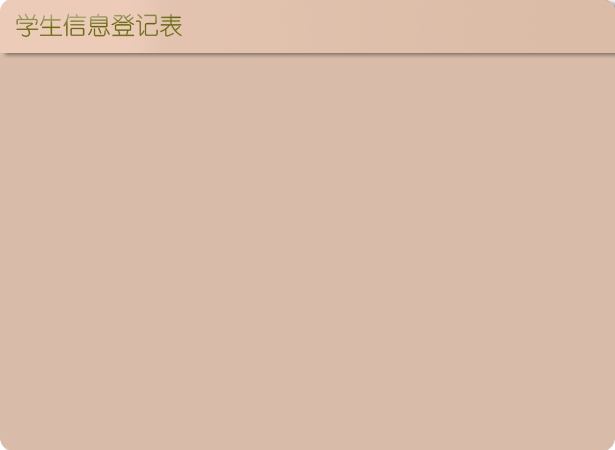
<style>
.page{position:relative;width:615px;height:450px;background:#d8bca9}
.page>*{position:absolute;margin:0}
.t1{font:24px "YouYuan";color:#6b7016}
</style>
<div class="page">
<p class="t1" style="left:16px;top:13px;width:166px;height:24px">学生信息登记表</p>
</div>
